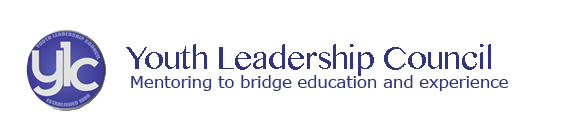
<style>
.page{position:relative;width:572px;height:140px;background:#ffffff}
.page>*{position:absolute;margin:0}
.t1{font:32px "OriyaMN";letter-spacing:-0.02em;color:#31367c}
.t2{font:17px "MSReferenceSansSerif";letter-spacing:-0.02em;color:#31367c}
</style>
<div class="page">
<p class="t1" style="left:126px;top:44px;width:365px;height:32px">Youth Leadership Council</p>
<p class="t2" style="left:131px;top:75px;width:377px;height:16px">Mentoring to bridge education and experience</p>
</div>
